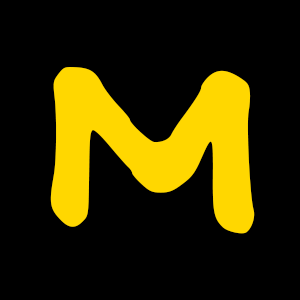
<style>
.page{position:relative;width:300px;height:300px;background:#000000}
.page>*{position:absolute;margin:0}
.t1{font:354px "MMCBold";color:#ffd700}
</style>
<div class="page">
<p class="t1" style="left:50px;top:67px;width:205px;height:167px">M</p>
</div>
